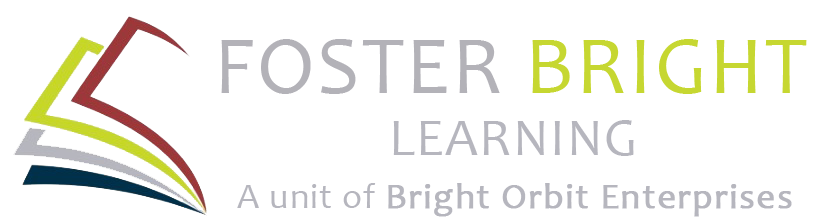
<style>
.page{position:relative;width:817px;height:218px;background:#ffffff}
.page>*{position:absolute;margin:0}
.t1{font:83px "Candara";letter-spacing:0.03em;color:#b3b2b8}
.t2{font:83px "Candara";letter-spacing:0.03em;color:#c6d731}
.t3{font:53px "Candara";letter-spacing:0.03em;color:#b6b6be}
.t4{font:36px "Candara";letter-spacing:0.03em;color:#b6b6be;font-weight:bold}
.t5{font:36px "Candara";letter-spacing:0.03em;color:#b6b6be}
</style>
<div class="page">
<p class="t1" style="left:221px;top:39px;width:586px;height:55px">FOSTER <span class="t2">BRIGHT</span></p>
<p class="t3" style="left:393px;top:120px;width:241px;height:36px">LEARNING</p>
<p class="t4" style="left:237px;top:183px;width:555px;height:34px"><span class="t5">A unit of </span>Bright Orbit Enterprises</p>
</div>
